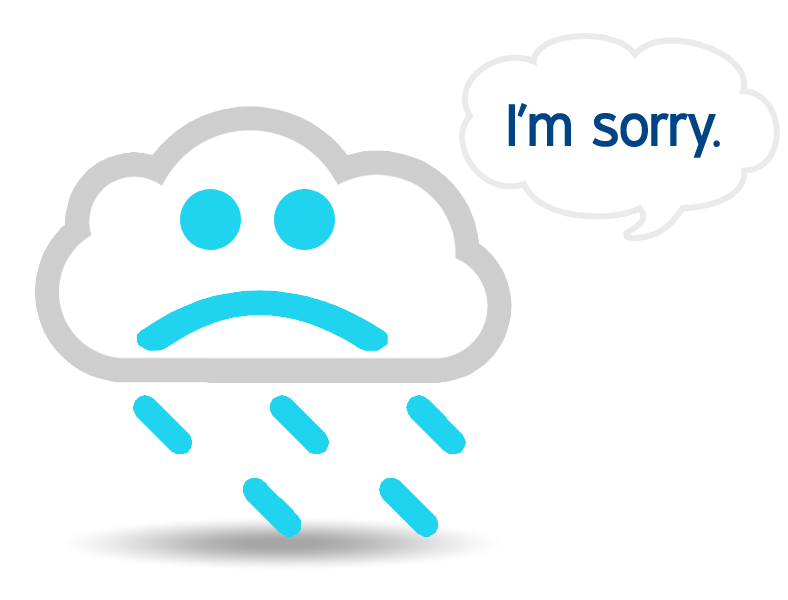
<style>
.page{position:relative;width:788px;height:600px;background:#ffffff}
.page>*{position:absolute;margin:0}
.t1{font:60px "ExpresswayRg-Regular";color:#004486}
</style>
<div class="page">
<p class="t1" style="left:508px;top:103px;width:212px;height:55px">I’m sorry.</p>
</div>
